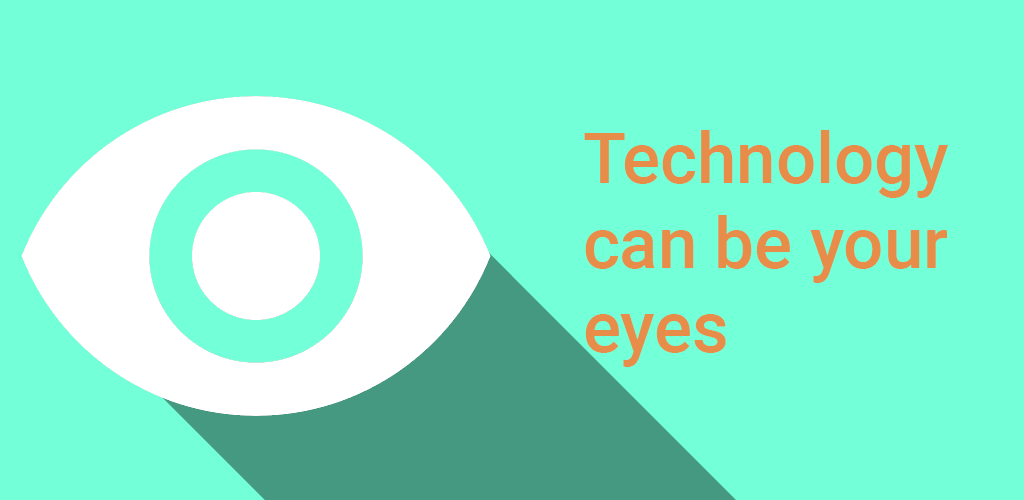
<style>
.page{position:relative;width:1024px;height:500px;background:#73ffd7}
.page>*{position:absolute;margin:0}
.t1{font:70.6px "Roboto-Medium";color:#e78c49}
</style>
<div class="page">
<p class="t1" style="left:584px;top:130px;width:364px;height:237px">Technology can be your eyes</p>
</div>
